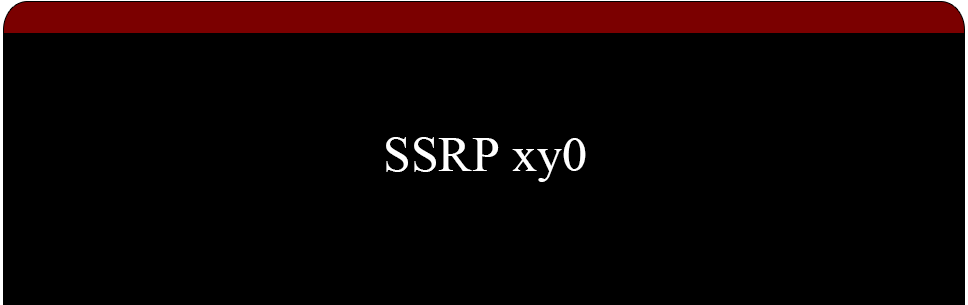
<style>
.page{position:relative;width:968px;height:305px;background:#000000}
.page>*{position:absolute;margin:0}
.t1{font:50px "TimesNewRomanPSMT";color:#ffffff}
</style>
<div class="page">
<p class="t1" style="left:386px;top:137px;width:200px;height:45px">SSRP xy0</p>
</div>
